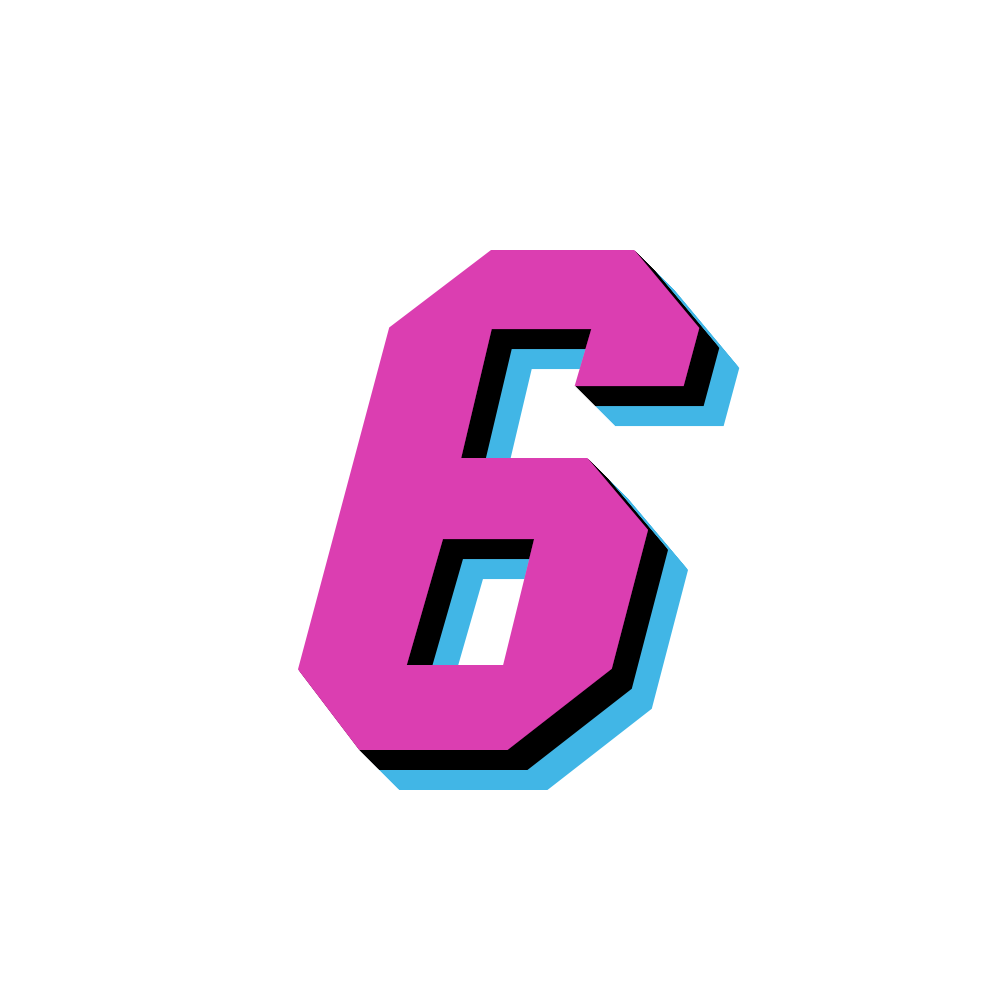
<style>
.page{position:relative;width:1000px;height:1000px;background:#ffffff}
.page>*{position:absolute;margin:0}
.t1{font:625px "NBAHeat";color:#db3eb1}
</style>
<div class="page">
<p class="t1" style="left:298px;top:250px;width:402px;height:500px">6</p>
</div>
